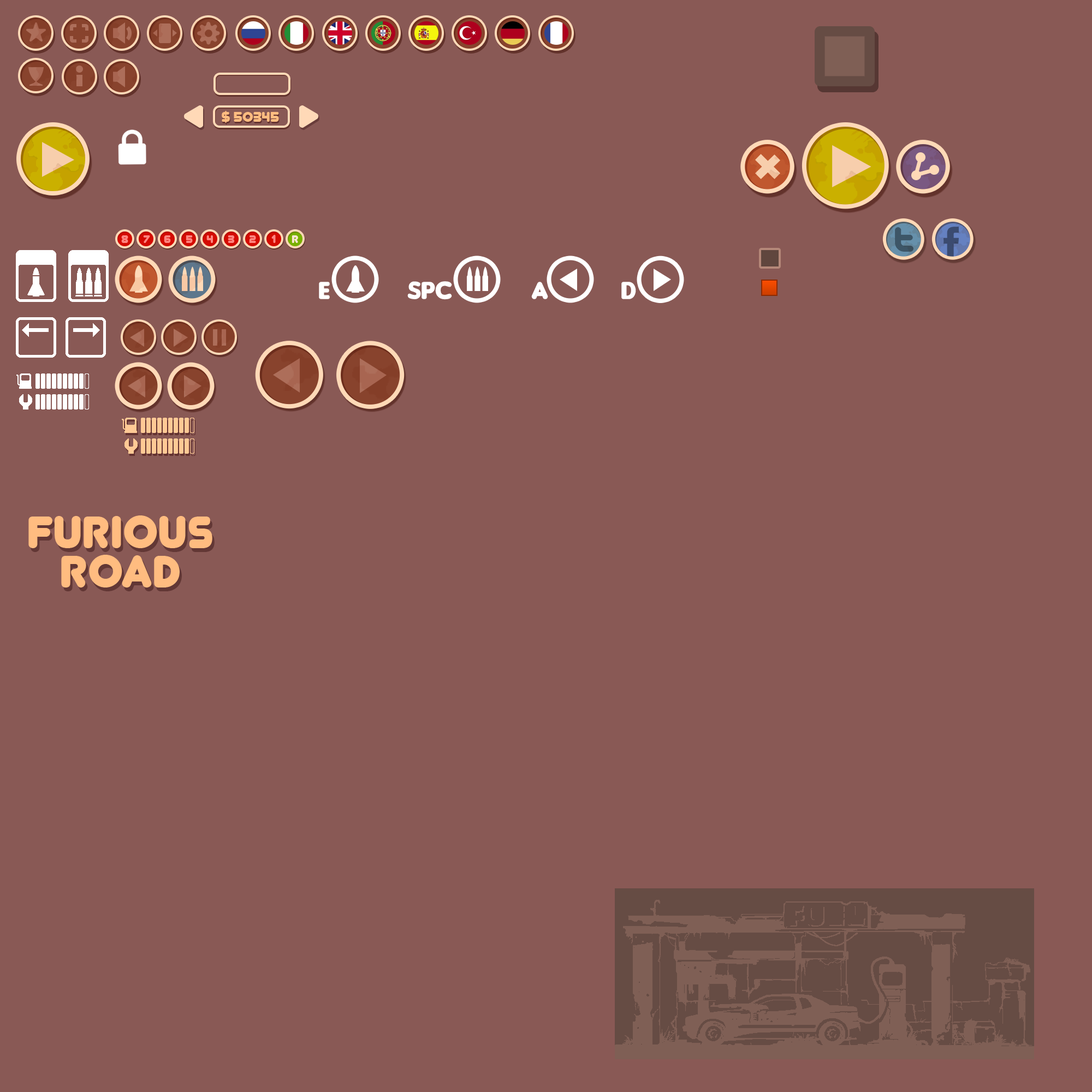
<style>
.page{position:relative;width:1092px;height:1092px;background:#895955}
.page>*{position:absolute;margin:0}
.t1{font:16.4px "Junegull";color:#ffbc80}
.t2{font:13.1px "Junegull_Redact";letter-spacing:-0.025em;color:#ff857f}
.t3{font:13.1px "Junegull_Redact";letter-spacing:-0.025em;color:#ffe7d2}
.t4{font:26.2px "Insaniburger";color:#ffffff;text-transform:uppercase}
.t5{font:53.5px/39.3px "Junegull";color:#ffbc80}
</style>
<div class="page">
<p class="t1" style="left:222px;top:111px;width:57px;height:12px">$ 50345</p>
<p class="t2" style="left:121px;top:235px;width:7px;height:8px">8</p>
<p class="t2" style="left:143px;top:235px;width:7px;height:8px">7</p>
<p class="t2" style="left:164px;top:235px;width:7px;height:8px">6</p>
<p class="t2" style="left:186px;top:235px;width:7px;height:8px">5</p>
<p class="t2" style="left:206px;top:235px;width:7px;height:8px">4</p>
<p class="t2" style="left:228px;top:235px;width:7px;height:8px">3</p>
<p class="t2" style="left:249px;top:235px;width:7px;height:8px">2</p>
<p class="t2" style="left:271px;top:235px;width:5px;height:8px">1</p>
<p class="t3" style="left:292px;top:235px;width:6px;height:8px">r</p>
<p class="t4" style="left:319px;top:282px;width:11px;height:17px">e</p>
<p class="t4" style="left:407px;top:281px;width:45px;height:19px">spc</p>
<p class="t4" style="left:531px;top:282px;width:17px;height:17px">A</p>
<p class="t4" style="left:621px;top:282px;width:15px;height:17px">D</p>
<p class="t5" style="left:28px;top:515px;width:184px;height:72px;text-align:center">FURIOUS<br>ROAD</p>
</div>
